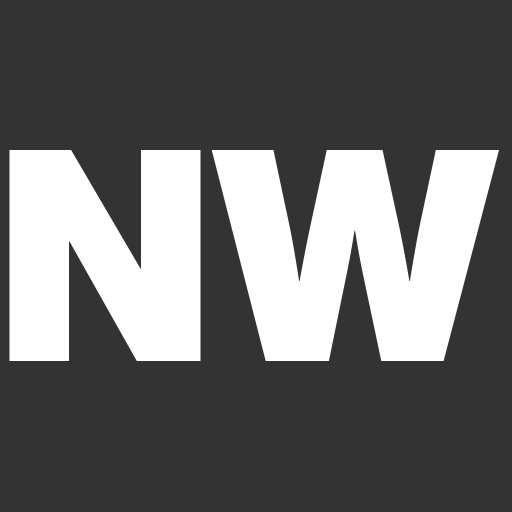
<style>
.page{position:relative;width:512px;height:512px;background:#333333}
.page>*{position:absolute;margin:0}
.t1{font:295px "NHaasGroteskDSPro-95Blk";color:#ffffff}
</style>
<div class="page">
<p class="t1" style="left:9px;top:150px;width:490px;height:211px">NW</p>
</div>
